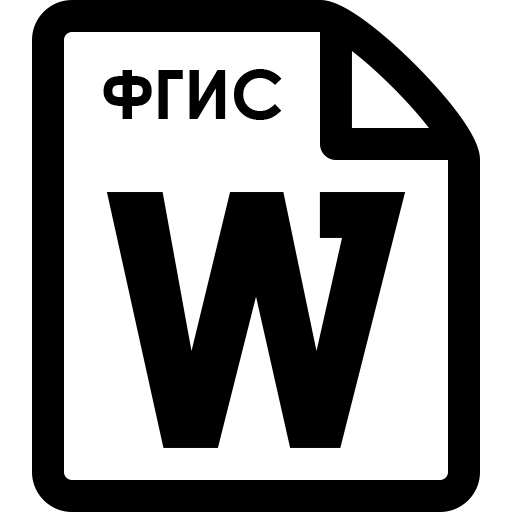
<style>
.page{position:relative;width:512px;height:512px;background:#ffffff}
.page>*{position:absolute;margin:0}
.t1{font:67.7px "CenturyGothic-Bold";color:#000000}
</style>
<div class="page">
<p class="t1" style="left:103px;top:69px;width:179px;height:51px">ФГИС</p>
</div>
